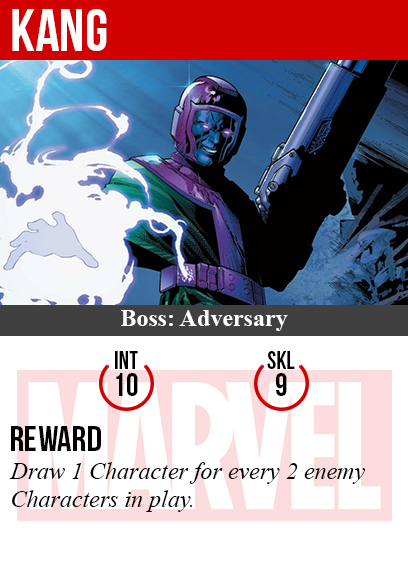
<style>
.page{position:relative;width:408px;height:585px;background:#ffffff}
.page>*{position:absolute;margin:0}
.t1{font:60px "BebasNeue";color:#ffffff}
.t2{font:24px "TimesNewRomanPS-BoldMT";color:#ffffff}
.t3{font:25px "BebasNeue";color:#000000}
.t4{font:32px "BebasNeue";color:#000000}
.t5{font:36px "BebasNeue";color:#000000}
.t6{font:24px "TimesNewRomanPS-ItalicMT";color:#000000}
</style>
<div class="page">
<p class="t1" style="left:12px;top:9px;width:95px;height:42px">kang</p>
<p class="t2" style="left:121px;top:310px;width:167px;height:21px">Boss: Adversary</p>
<p class="t3" style="left:115px;top:351px;width:23px;height:18px">int</p>
<p class="t3" style="left:267px;top:351px;width:28px;height:18px">skl</p>
<p class="t4" style="left:116px;top:373px;width:22px;height:23px">10</p>
<p class="t4" style="left:276px;top:373px;width:11px;height:23px">9</p>
<p class="t5" style="left:11px;top:426px;width:90px;height:25px">reward</p>
<p class="t6" style="left:9px;top:462px;width:357px;height:50px">Draw 1 Character for every 2 enemy<br>Characters in play.</p>
</div>
